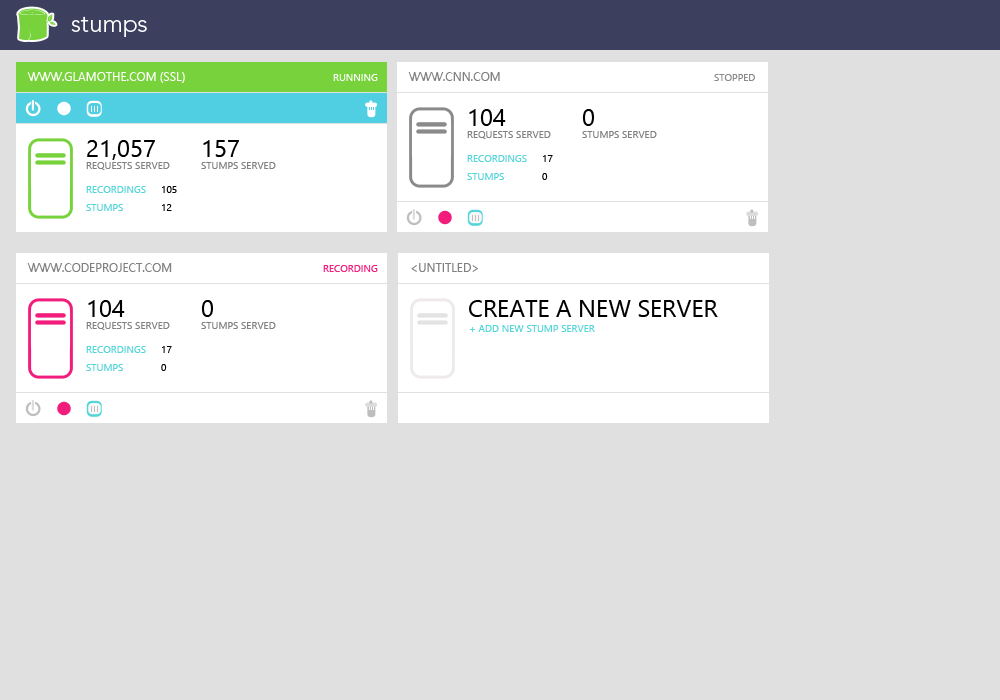
<style>
.page{position:relative;width:1000px;height:700px;background:#e0e0e0}
.page>*{position:absolute;margin:0}
.t1{font:24px "Avenir-Light";color:#ffffff}
.t2{font:12px "SegoeUI";color:#ffffff}
.t3{font:10px "SegoeUI";color:#ffffff}
.t4{font:12px "SegoeUI";color:#808080}
.t5{font:10px "SegoeUI";color:#8a8a8a}
.t6{font:24px "SegoeUI";color:#000000}
.t7{font:10px "SegoeUI";color:#808080}
.t8{font:10px/18px "SegoeUI";color:#54d5d9}
.t9{font:10px/18px "SegoeUI";color:#000000}
.t10{font:10px "SegoeUI";color:#f21c7c}
.t11{font:10px "SegoeUI";color:#54d5d9}
</style>
<div class="page">
<p class="t1" style="left:71px;top:16px;width:76px;height:21px">stumps</p>
<p class="t2" style="left:27px;top:72px;width:158px;height:11px">WWW.GLAMOTHE.COM (SSL)</p>
<p class="t3" style="left:333px;top:74px;width:45px;height:7px">RUNNING</p>
<p class="t4" style="left:408px;top:72px;width:92px;height:9px">WWW.CNN.COM</p>
<p class="t5" style="left:714px;top:74px;width:41px;height:7px">STOPPED</p>
<p class="t6" style="left:469px;top:109px;width:37px;height:17px">104</p>
<p class="t6" style="left:582px;top:109px;width:13px;height:17px">0</p>
<p class="t7" style="left:467px;top:131px;width:84px;height:8px">REQUESTS SERVED</p>
<p class="t7" style="left:582px;top:131px;width:75px;height:7px">STUMPS SERVED</p>
<p class="t6" style="left:87px;top:140px;width:68px;height:20px">21,057</p>
<p class="t6" style="left:203px;top:140px;width:36px;height:17px">157</p>
<p class="t8" style="left:467px;top:155px;width:60px;height:25px">RECORDINGS<br>STUMPS</p>
<p class="t9" style="left:542px;top:155px;width:11px;height:25px">17<br>0</p>
<p class="t7" style="left:86px;top:162px;width:84px;height:8px">REQUESTS SERVED</p>
<p class="t7" style="left:201px;top:162px;width:75px;height:7px">STUMPS SERVED</p>
<p class="t8" style="left:86px;top:186px;width:60px;height:25px">RECORDINGS<br>STUMPS</p>
<p class="t9" style="left:162px;top:186px;width:15px;height:25px">105<br>12</p>
<p class="t4" style="left:27px;top:263px;width:145px;height:9px">WWW.CODEPROJECT.COM</p>
<p class="t10" style="left:323px;top:265px;width:55px;height:7px">RECORDING</p>
<p class="t4" style="left:411px;top:263px;width:67px;height:9px">&lt;UNTITLED&gt;</p>
<p class="t6" style="left:88px;top:300px;width:37px;height:17px">104</p>
<p class="t6" style="left:201px;top:300px;width:13px;height:17px">0</p>
<p class="t6" style="left:469px;top:300px;width:249px;height:17px">CREATE A NEW SERVER</p>
<p class="t7" style="left:86px;top:322px;width:84px;height:8px">REQUESTS SERVED</p>
<p class="t7" style="left:201px;top:322px;width:75px;height:7px">STUMPS SERVED</p>
<p class="t11" style="left:470px;top:325px;width:125px;height:7px">+ ADD NEW STUMP SERVER</p>
<p class="t8" style="left:86px;top:346px;width:60px;height:25px">RECORDINGS<br>STUMPS</p>
<p class="t9" style="left:161px;top:346px;width:11px;height:25px">17<br>0</p>
</div>
